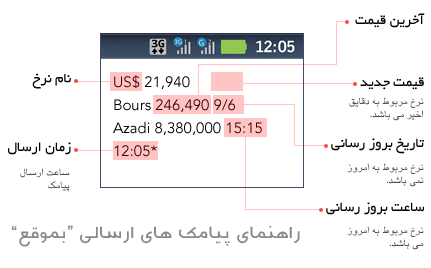
<style>
.page{position:relative;width:431px;height:268px;background:#ffffff}
.page>*{position:absolute;margin:0}
.t1{font:15px "BYekan";color:#000000}
.t2{font:15px/23px "Avenir-Book"}
.t3{font:11px "BYagut";color:#4a4a4a}
.t4{font:20px "BZayton";color:#8a8a8a}
</style>
<div class="page">
<p class="t1" style="left:355px;top:13px;width:70px;height:15px">آخرین قیمت</p>
<p class="t1" style="left:32px;top:73px;width:39px;height:16px">نام نرخ</p>
<p class="t2" style="left:113px;top:75px;width:149px;height:82px">US$ 21,940 <br>Bours 246,490 9/6 <br>Azadi 8,380,000 15:15 <br>12:05*</p>
<p class="t1" style="left:360px;top:77px;width:64px;height:13px">قیمت جدید</p>
<p class="t3" style="left:349px;top:97px;width:75px;height:24px">نرخ مربوط به دقایق<br>اخیر می باشد.</p>
<p class="t1" style="left:8px;top:142px;width:63px;height:13px">زمان ارسال</p>
<p class="t1" style="left:331px;top:138px;width:93px;height:16px">تاریخ بروز رسانی</p>
<p class="t3" style="left:20px;top:168px;width:50px;height:24px">ساعت ارسال<br>پیامک</p>
<p class="t3" style="left:347px;top:163px;width:77px;height:24px">نرخ مربوط به امروز<br>نمی باشد.</p>
<p class="t1" style="left:326px;top:202px;width:98px;height:13px">ساعت بروز رسانی</p>
<p class="t4" style="left:11px;top:225px;width:289px;height:22px">“راهنمای پیامک های ارسالی “بموقع</p>
<p class="t3" style="left:347px;top:226px;width:77px;height:24px">نرخ مربوط به امروز<br>می باشد.</p>
</div>
